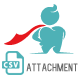
<style>
.page{position:relative;width:80px;height:80px;background:#ffffff}
.page>*{position:absolute;margin:0}
.t1{font:11px "Kenzo";letter-spacing:0.025em;color:#6a6a6a}
</style>
<div class="page">
<p class="t1" style="left:26px;top:63px;width:52px;height:9px">attachment</p>
</div>
